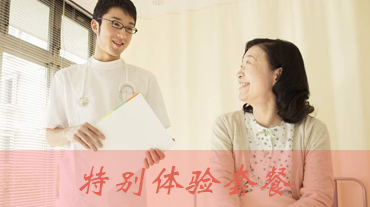
<style>
.page{position:relative;width:370px;height:207px}
.page>*{position:absolute;margin:0}
.t1{font:36px "STXinwei";color:#e36453;font-style:italic}
</style>
<div class="page">
<p class="t1" style="left:79px;top:164px;width:213px;height:33px">特别体验套餐</p>
</div>
